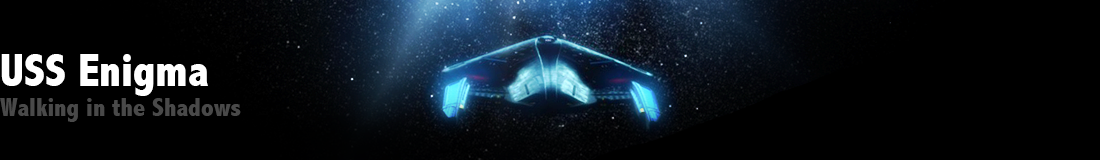
<style>
.page{position:relative;width:1100px;height:160px;background:#000000}
.page>*{position:absolute;margin:0}
.t1{font:47.1px "AbadiMT-CondensedExtraBold";color:#ffffff}
.t2{font:25.8px "AbadiMT-CondensedExtraBold";color:#494949}
</style>
<div class="page">
<p class="t1" style="left:1px;top:54px;width:207px;height:42px">USS Enigma</p>
<p class="t2" style="left:0px;top:98px;width:241px;height:24px">Walking in the Shadows</p>
</div>
